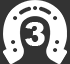
<style>
.page{position:relative;width:70px;height:64px;background:#ffffff}
.page>*{position:absolute;margin:0}
.t1{font:33.3px "Arial-Black";color:#ffffff}
</style>
<div class="page">
<p class="t1" style="left:25px;top:22px;width:20px;height:24px">3</p>
</div>
